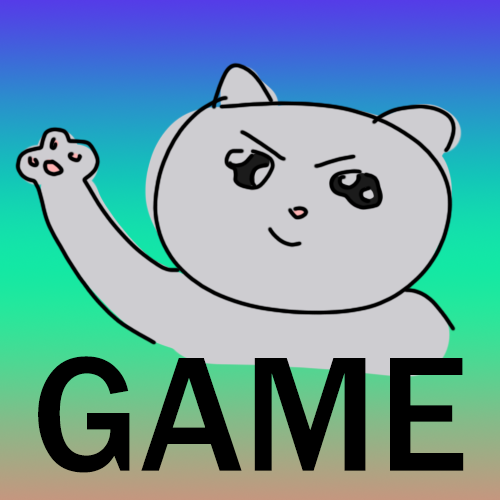
<style>
.page{position:relative;width:500px;height:500px;background:#cecdd1}
.page>*{position:absolute;margin:0}
.t1{font:168.7px "FranklinGothic-Medium";color:#000000}
</style>
<div class="page">
<p class="t1" style="left:38px;top:356px;width:426px;height:117px">GAME</p>
</div>
